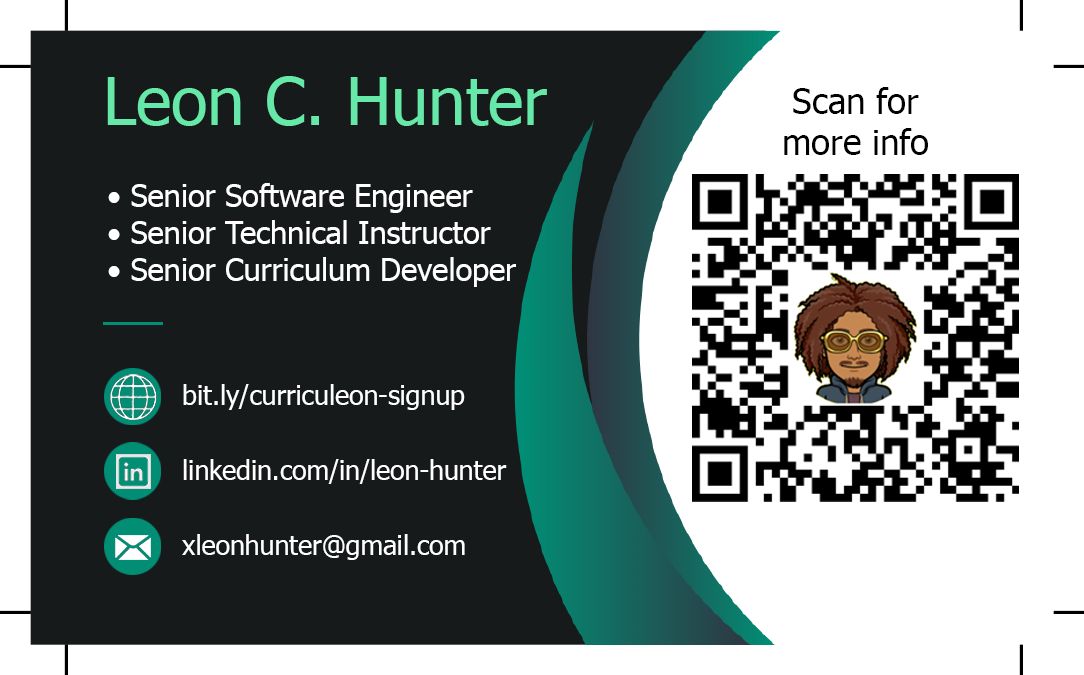
<style>
.page{position:relative;width:1084px;height:675px;background:#171a1b}
.page>*{position:absolute;margin:0}
.t1{font:66.3px "Tahoma";color:#66e9a8}
.t2{font:34.6px "Tahoma";color:#000000}
.t3{font:7.4px "Tahoma";color:#ffffff}
.t4{font:26.5px "Tahoma";color:#ffffff}
</style>
<div class="page">
<p class="t1" style="left:107px;top:76px;width:440px;height:50px">Leon C. Hunter</p>
<p class="t2" style="left:784px;top:87px;width:144px;height:68px;text-align:center">Scan for<br>more info</p>
<p class="t3" style="left:108px;top:183px;width:408px;height:104px">• Senior Software Engineer<br>• Senior Technical Instructor<br>• Senior Curriculum Developer</p>
<p class="t4" style="left:183px;top:384px;width:282px;height:26px">bit.ly/curriculeon-signup</p>
<p class="t4" style="left:183px;top:459px;width:324px;height:25px">linkedin.com/in/leon-hunter</p>
<p class="t4" style="left:182px;top:534px;width:283px;height:26px">xleonhunter@gmail.com</p>
</div>
